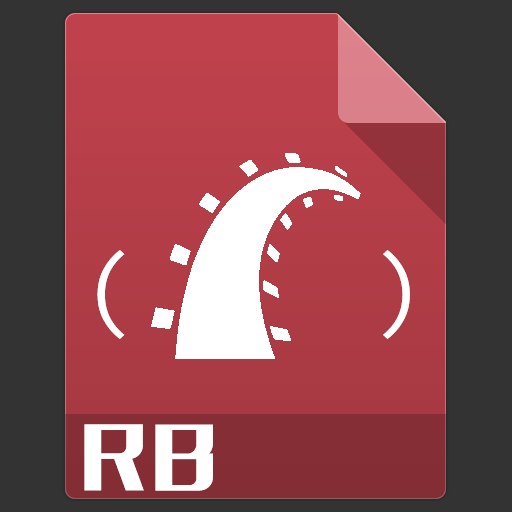
<style>
.page{position:relative;width:512px;height:512px;background:#333333}
.page>*{position:absolute;margin:0}
.t1{font:72px "MFLiHei_Noncommercial-Regular";letter-spacing:0.07em;color:#ffffff}
</style>
<div class="page">
<p class="t1" style="left:84px;top:424px;width:129px;height:67px">RB</p>
</div>
